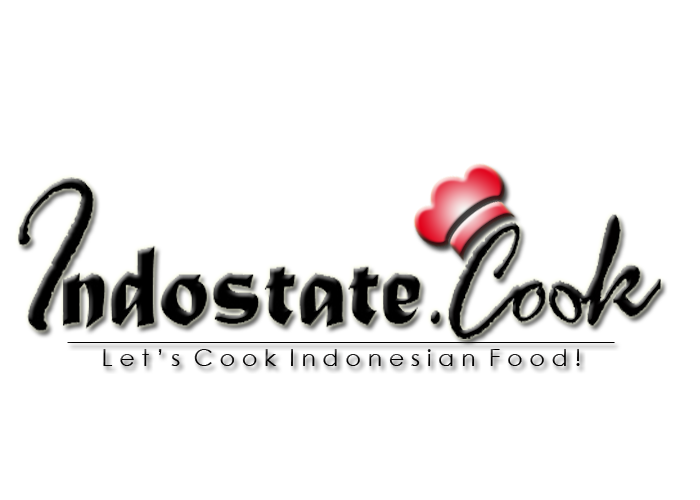
<style>
.page{position:relative;width:700px;height:500px;background:#ffffff}
.page>*{position:absolute;margin:0}
.t1{font:22.8px "CenturyGothic";color:#010000;scale:1.05 1}
</style>
<div class="page">
<p class="t1" style="left:103px;top:349px;width:477px;height:17px">L e t ’ s  C o o k  I n d o n e s i a n  F o o d !</p>
</div>
